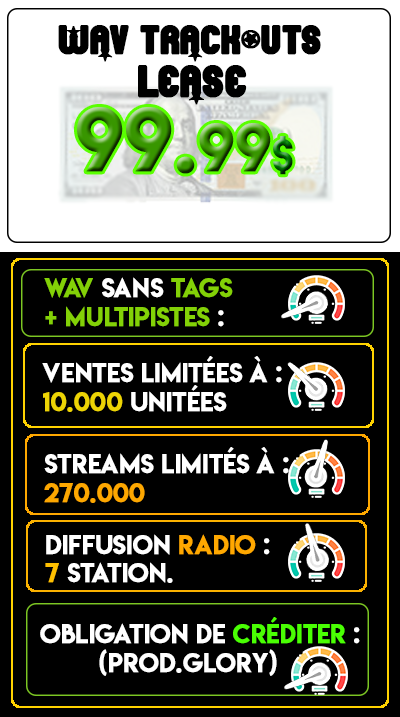
<style>
.page{position:relative;width:400px;height:717px;background:#000000}
.page>*{position:absolute;margin:0}
.t1{font:44.3px "Pornstar";color:#000000;text-transform:uppercase;font-weight:bold}
.t2{font:48px "Pornstar";color:#000000;text-transform:uppercase;font-weight:bold}
.t3{font:80.4px "LemonMilk";text-transform:uppercase;font-weight:bold}
.t4{font:60.3px "LemonMilk";text-transform:uppercase;font-weight:bold}
.t5{font:40.2px "LemonMilk";text-transform:uppercase;font-weight:bold}
.t6{font:24px "LemonMilk";color:#83d107;text-transform:uppercase;font-weight:bold}
.t7{font:24px "LemonMilk";color:#ffffff;text-transform:uppercase;font-weight:bold}
.t8{font:24px "LemonMilk";color:#edd405;text-transform:uppercase;font-weight:bold}
.t9{font:24px "LemonMilk";color:#fda700;text-transform:uppercase;font-weight:bold}
.t10{font:24px "LemonMilk";color:#ffa800;text-transform:uppercase;font-weight:bold}
.t11{font:24px "LemonMilk";color:#ffc000;text-transform:uppercase;font-weight:bold}
.t12{font:24px "LemonMilk";color:#4aff03;text-transform:uppercase;font-weight:bold}
</style>
<div class="page">
<p class="t1" style="left:58px;top:25px;width:263px;height:37px">wav trackouts</p>
<p class="t2" style="left:138px;top:65px;width:109px;height:40px">lease</p>
<p class="t3" style="left:77px;top:107px;width:216px;height:68px">99.<span class="t4">99</span><span class="t5">$</span></p>
<p class="t6" style="left:44px;top:277px;width:189px;height:50px">wav<span class="t7"> sans </span>tags <br>+ multipistes<span class="t7"> :</span></p>
<p class="t7" style="left:42px;top:356px;width:240px;height:56px">ventes limitées à : <br><span class="t8">10.000</span> unitées</p>
<p class="t7" style="left:44px;top:447px;width:245px;height:56px">streams limités à : <br><span class="t9">270.000</span></p>
<p class="t7" style="left:45px;top:534px;width:225px;height:49px">diffusion <span class="t10">radio</span> : <br><span class="t11">7</span> station.</p>
<p class="t7" style="left:40px;top:617px;width:320px;height:59px">obligation de <span class="t12">créditer</span> :<br>        (prod.glory)</p>
</div>
